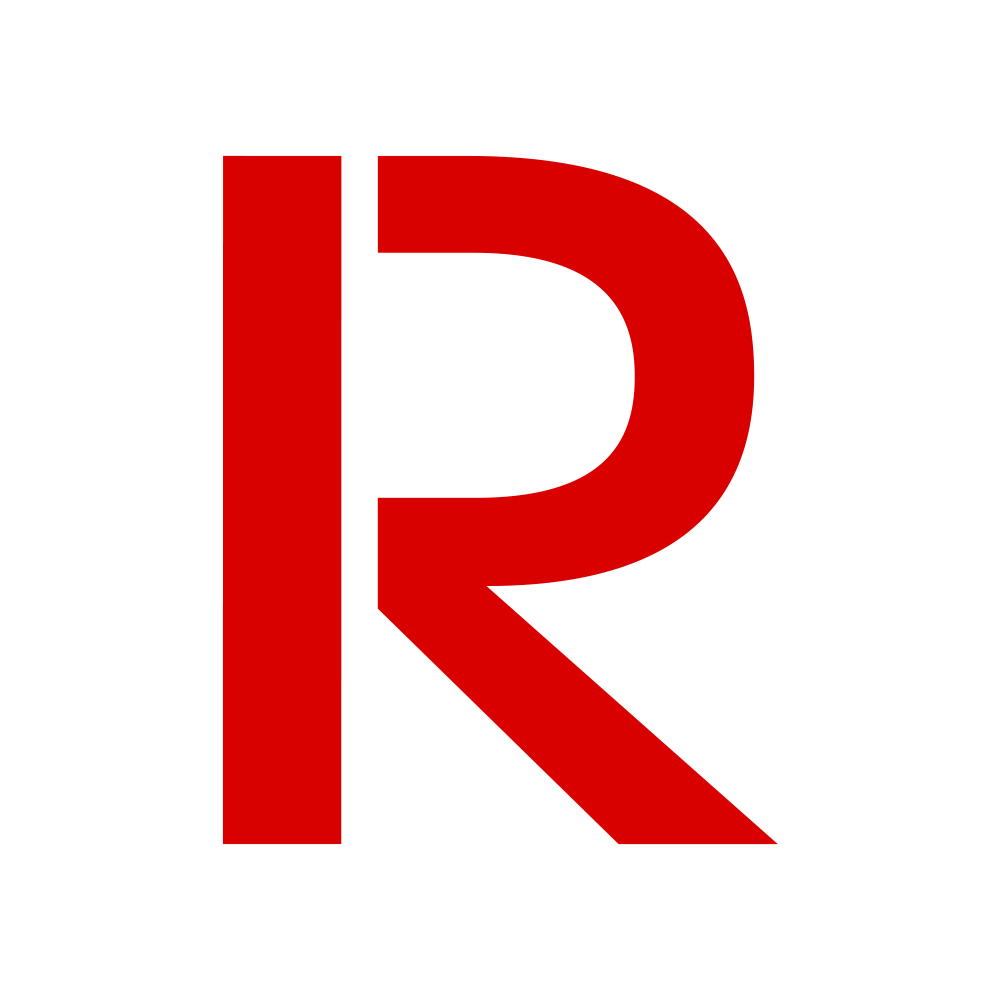
<style>
.page{position:relative;width:1000px;height:1000px;background:#ffffff}
.page>*{position:absolute;margin:0}
.t1{font:1075.1px "ParalucentStencil-Medium";color:#d90000}
</style>
<div class="page">
<p class="t1" style="left:222px;top:155px;width:556px;height:690px">R</p>
</div>
